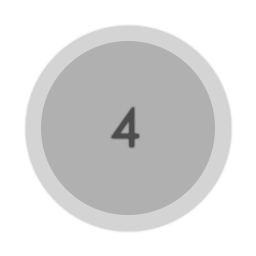
<style>
.page{position:relative;width:256px;height:256px;background:#ffffff}
.page>*{position:absolute;margin:0}
.t1{font:53.9px "CenturyGothic";color:#4d4d4d}
</style>
<div class="page">
<p class="t1" style="left:111px;top:107px;width:28px;height:40px">4</p>
</div>
